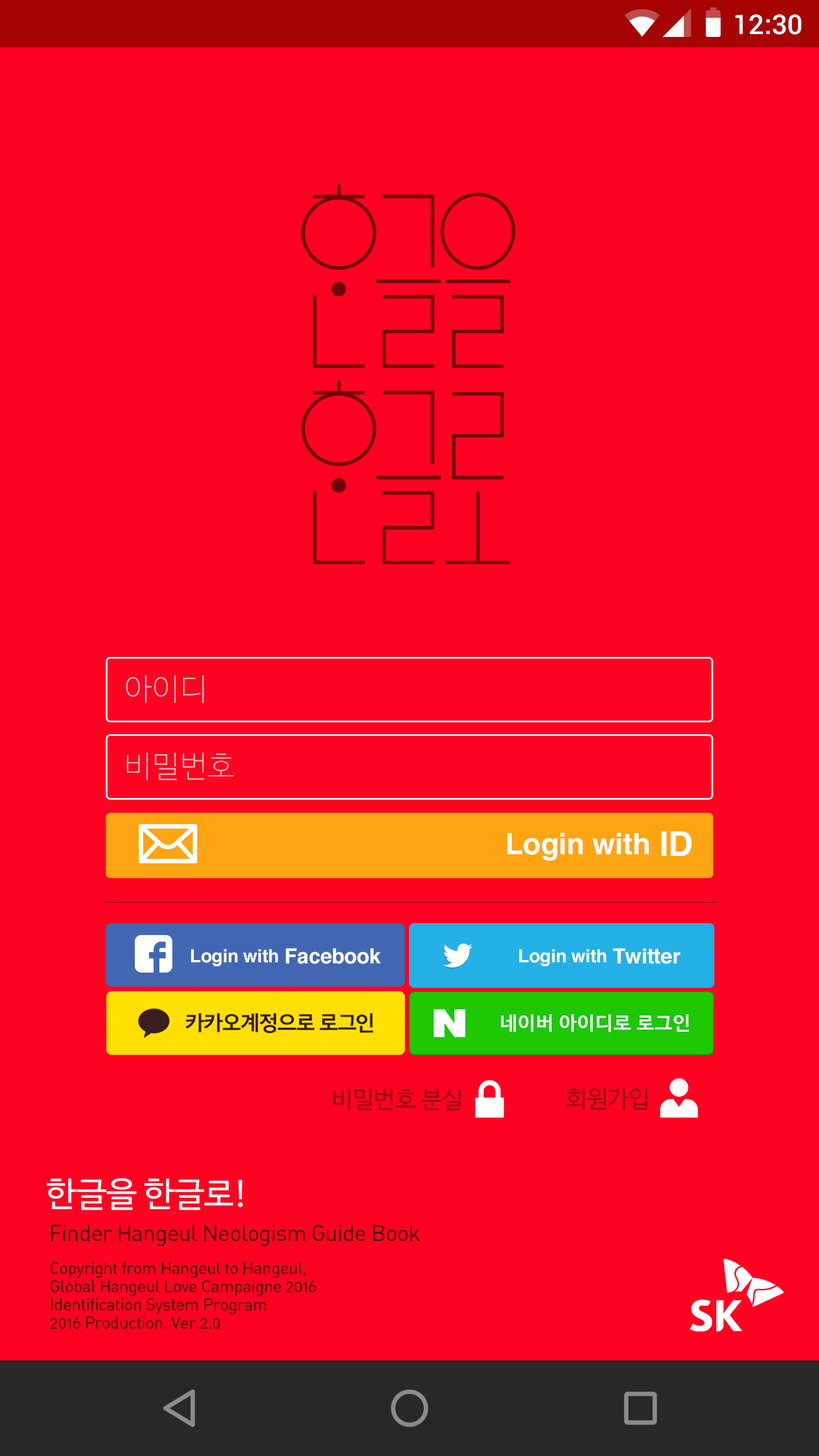
<style>
.page{position:relative;width:819px;height:1456px;background:#ff0222}
.page>*{position:absolute;margin:0}
.t1{font:27.3px "Roboto-Medium";color:#ffffff}
.t2{font:30.3px "NanumBarunGothicUltraLight";letter-spacing:0.025em;color:#ffc3c7}
.t3{font:29.6px "HelveticaCE-Bold";letter-spacing:-0.01em;color:#ffffff}
.t4{font:34.1px "Helvetica-Bold";letter-spacing:-0.01em;color:#ffffff}
.t5{font:18.2px "Helvetica-Bold";letter-spacing:-0.01em;color:#ffffff}
.t6{font:21px "Helvetica-Bold";letter-spacing:-0.01em;color:#ffffff}
.t7{font:23.9px "NanumBarunGothic";letter-spacing:-0.01em;color:#960114}
.t8{font:34.1px "NanumBarunGothic";letter-spacing:-0.01em;color:#ffffff}
.t9{font:22.7px "DINAlternate-Regular";letter-spacing:-0.025em;color:#400002}
.t10{font:17.1px/18.2px "DINAlternate-Regular";letter-spacing:-0.025em;color:#400002}
</style>
<div class="page">
<p class="t1" style="left:735px;top:14px;width:66px;height:21px">12:30</p>
<p class="t2" style="left:126px;top:675px;width:78px;height:28px">아이디</p>
<p class="t2" style="left:127px;top:752px;width:107px;height:28px">비밀번호</p>
<p class="t3" style="left:507px;top:831px;width:185px;height:30px">Login with <span class="t4">ID</span></p>
<p class="t5" style="left:191px;top:948px;width:190px;height:18px">Login with<span class="t6"> Facebook</span></p>
<p class="t5" style="left:519px;top:948px;width:161px;height:18px">Login with<span class="t6"> Twitter</span></p>
<p class="t7" style="left:333px;top:1089px;width:128px;height:22px">비밀번호 분실</p>
<p class="t7" style="left:566px;top:1088px;width:81px;height:22px">회원가입</p>
<p class="t8" style="left:47px;top:1178px;width:196px;height:32px">한글을 한글로!</p>
<p class="t9" style="left:51px;top:1225px;width:369px;height:21px">Finder Hangeul Neologism Guide Book</p>
<p class="t10" style="left:50px;top:1261px;width:266px;height:68px">Copyright from Hangeul to Hangeul,<br>Global Hangeul Love Campaigne 2016<br>Identification System Program <br>2016 Production. Ver.2.0</p>
</div>
